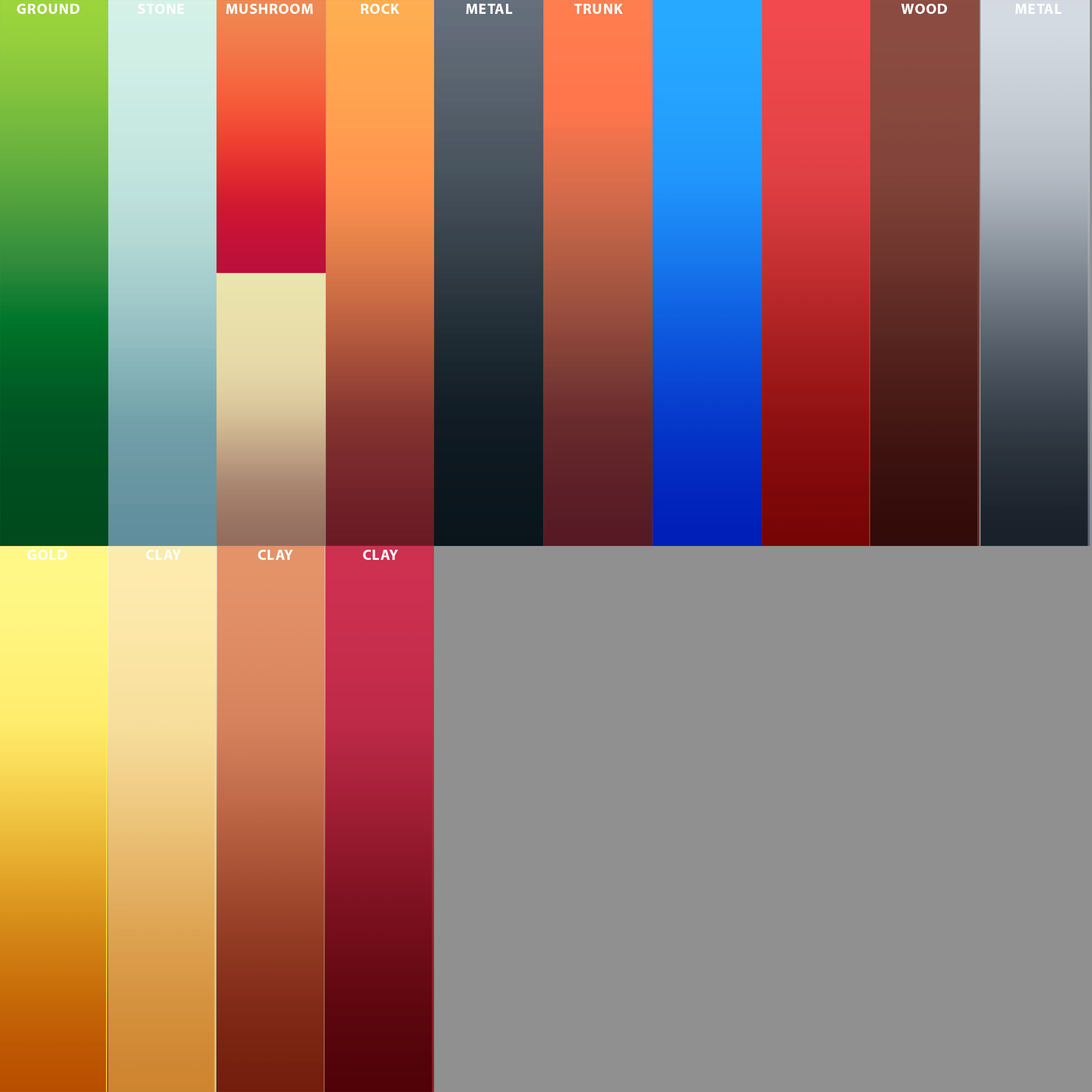
<style>
.page{position:relative;width:1092px;height:1092px;background:#909090}
.page>*{position:absolute;margin:0}
.t1{font:14.7px "MyriadPro-Bold";letter-spacing:0.05em;color:#ffffff}
</style>
<div class="page">
<p class="t1" style="left:17px;top:4px;width:62px;height:10px">GROUND</p>
<p class="t1" style="left:138px;top:4px;width:46px;height:10px">STONE</p>
<p class="t1" style="left:226px;top:4px;width:87px;height:10px">MUSHROOM</p>
<p class="t1" style="left:361px;top:4px;width:38px;height:10px">ROCK</p>
<p class="t1" style="left:466px;top:4px;width:46px;height:10px">METAL</p>
<p class="t1" style="left:574px;top:4px;width:49px;height:10px">TRUNK</p>
<p class="t1" style="left:901px;top:4px;width:46px;height:10px">WOOD</p>
<p class="t1" style="left:1015px;top:4px;width:47px;height:10px">METAL</p>
<p class="t1" style="left:27px;top:550px;width:40px;height:10px">GOLD</p>
<p class="t1" style="left:146px;top:550px;width:35px;height:10px">CLAY</p>
<p class="t1" style="left:258px;top:550px;width:35px;height:10px">CLAY</p>
<p class="t1" style="left:363px;top:550px;width:35px;height:10px">CLAY</p>
</div>
